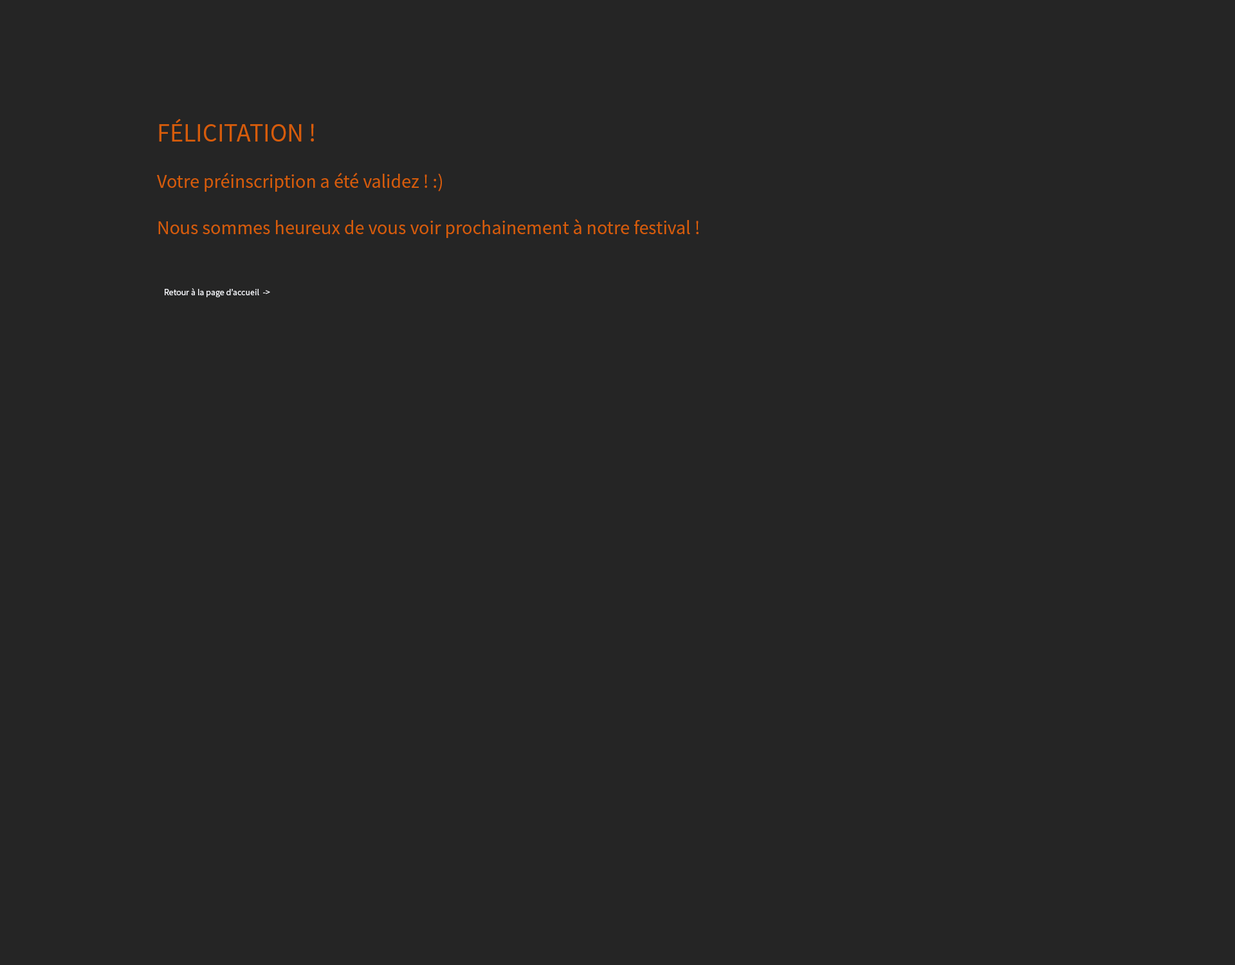
<style>
.page{position:relative;width:1235px;height:965px;background:#252525}
.page>*{position:absolute;margin:0}
.t1{font:19.3px "SourceSansPro-Regular";color:#d65c0a}
.t2{font:25.7px "SourceSansPro-Regular";color:#d65c0a}
.t3{font:9px "SourceSansPro-Regular";color:#f6f7fb}
</style>
<div class="page">
<p class="t1" style="left:157px;top:119px;width:542px;height:119px"><span class="t2">FÉLICITATION !<br></span><br>Votre préinscription a été validez ! :)<br><br>Nous sommes heureux de vous voir prochainement à notre festival !</p>
<p class="t3" style="left:165px;top:288px;width:105px;height:9px">Retour à la page d’accueil  -&gt;</p>
</div>
